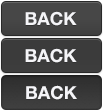
<style>
.page{position:relative;width:103px;height:111px}
.page>*{position:absolute;margin:0}
.t1{font:18px "HelveticaNeue-Bold";color:#f5f5f8}
</style>
<div class="page">
<p class="t1" style="left:25px;top:11px;width:52px;height:15px">BACK</p>
<p class="t1" style="left:25px;top:48px;width:52px;height:15px">BACK</p>
<p class="t1" style="left:26px;top:85px;width:51px;height:15px">BACK</p>
</div>
